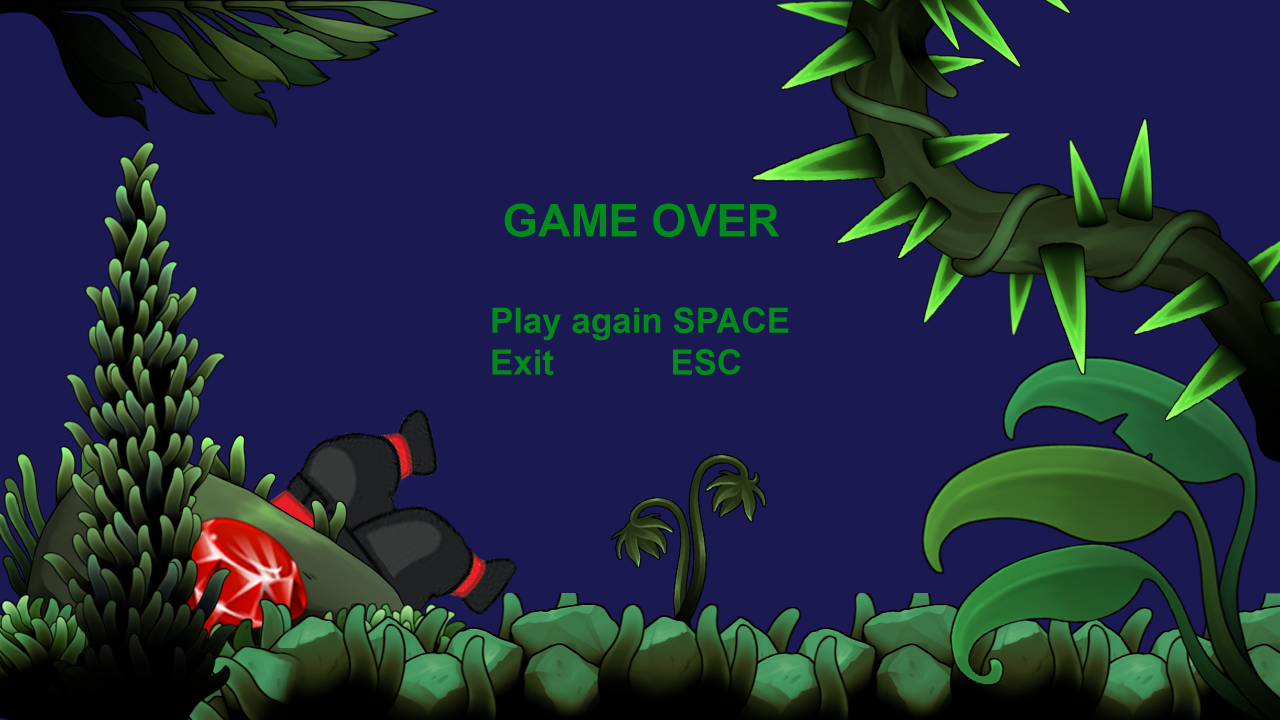
<style>
.page{position:relative;width:1280px;height:720px;background:#1a1952}
.page>*{position:absolute;margin:0}
.t1{font:34.9px "Arial-BoldMT";color:#008b1a}
.t2{font:45.3px "Arial-BoldMT";color:#008b1a}
</style>
<div class="page">
<p class="t1" style="left:492px;top:203px;width:297px;height:172px;text-align:center"><span class="t2">GAME OVER<br><br></span>Play again SPACE<br>Exit            ESC</p>
</div>
